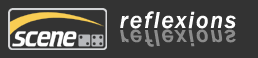
<style>
.page{position:relative;width:258px;height:58px;background:#333333}
.page>*{position:absolute;margin:0}
.t1{font:24px "FranklinGothic-MediumItalic";letter-spacing:0.075em;color:#fefefe}
.t2{font:24px "FranklinGothic-MediumItalic";letter-spacing:0.075em;color:#8c8c8c}
</style>
<div class="page">
<p class="t1" style="left:120px;top:11px;width:116px;height:18px">reflexions</p>
<p class="t2" style="left:120px;top:29px;width:116px;height:18px">reflexions</p>
</div>
